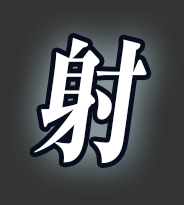
<style>
.page{position:relative;width:184px;height:205px;background:#333333}
.page>*{position:absolute;margin:0}
.t1{font:133.9px "RyuminPro-Heavy";letter-spacing:0.1em;color:#ffffff;font-style:italic;scale:0.8 1}
</style>
<div class="page">
<p class="t1" style="left:34px;top:37px;width:113px;height:126px">射</p>
</div>
